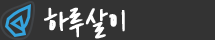
<style>
.page{position:relative;width:215px;height:40px;background:#333333}
.page>*{position:absolute;margin:0}
.t1{font:36px "Cafe24Shiningstar";color:#ffffff;font-weight:bold}
</style>
<div class="page">
<p class="t1" style="left:44px;top:7px;width:81px;height:32px">하루살이</p>
</div>
